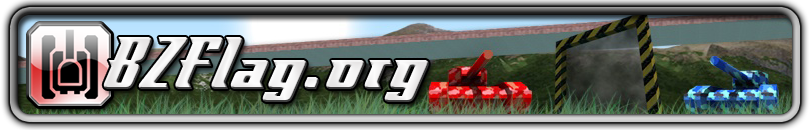
<style>
.page{position:relative;width:810px;height:130px}
.page>*{position:absolute;margin:0}
.t1{font:78.8px "FlyboyBB";color:#e2e0e0}
</style>
<div class="page">
<p class="t1" style="left:103px;top:37px;width:326px;height:65px">BZFlag.org</p>
</div>
